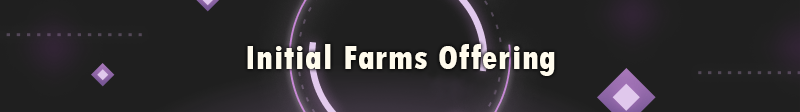
<style>
.page{position:relative;width:800px;height:112px;background:#1f1f1f}
.page>*{position:absolute;margin:0}
.t1{font:36px "TwCenMT-CondensedExtraBold";letter-spacing:0.02em;color:#fffbed}
</style>
<div class="page">
<p class="t1" style="left:247px;top:44px;width:308px;height:32px">Initial Farms Offering</p>
</div>
